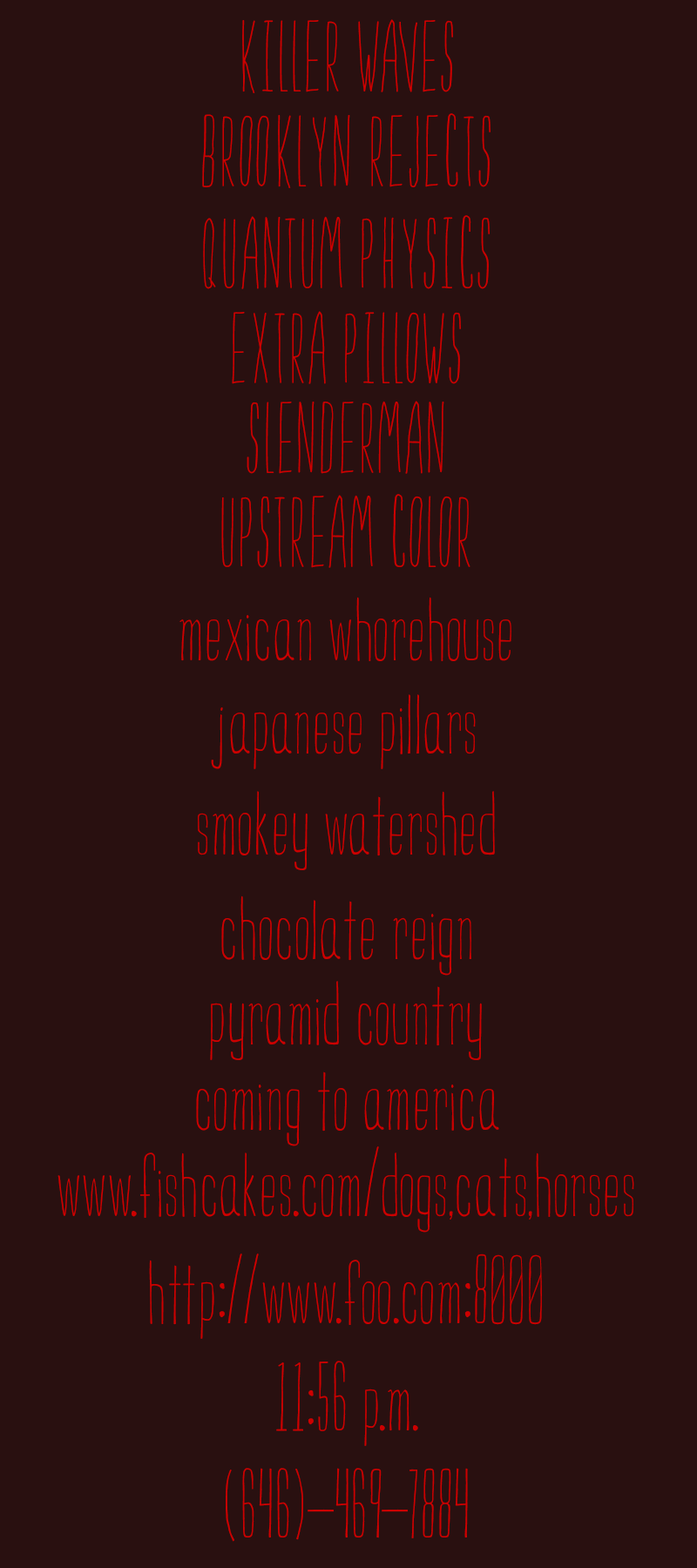
<style>
.page{position:relative;width:697px;height:1568px;background:#291010}
.page>*{position:absolute;margin:0}
.t1{font:80.1px "Slenderman-Regular";color:#cd0000}
</style>
<div class="page">
<p class="t1" style="left:242px;top:19px;width:211px;height:74px">KILLER WAVES</p>
<p class="t1" style="left:202px;top:113px;width:288px;height:75px">BROOKLYN REJECTS</p>
<p class="t1" style="left:203px;top:215px;width:287px;height:74px">QUANTUM PHYSICS</p>
<p class="t1" style="left:232px;top:311px;width:229px;height:73px">EXTRA PILLOWS</p>
<p class="t1" style="left:247px;top:401px;width:197px;height:73px">SLENDERMAN</p>
<p class="t1" style="left:221px;top:494px;width:249px;height:74px">UPSTREAM COLOR</p>
<p class="t1" style="left:179px;top:597px;width:332px;height:64px">mexican whorehouse</p>
<p class="t1" style="left:211px;top:694px;width:265px;height:75px">japanese pillars</p>
<p class="t1" style="left:198px;top:791px;width:297px;height:79px">smokey watershed</p>
<p class="t1" style="left:221px;top:896px;width:250px;height:80px">chocolate reign</p>
<p class="t1" style="left:210px;top:981px;width:272px;height:79px">pyramid country</p>
<p class="t1" style="left:196px;top:1071px;width:303px;height:75px">coming to america</p>
<p class="t1" style="left:57px;top:1146px;width:577px;height:87px">www.fishcakes.com/dogs,cats,horses</p>
<p class="t1" style="left:149px;top:1254px;width:393px;height:85px">http://www.foo.com:8000</p>
<p class="t1" style="left:276px;top:1361px;width:142px;height:85px">11:56 p.m.</p>
<p class="t1" style="left:226px;top:1468px;width:242px;height:74px">(646)-469-7884</p>
</div>
